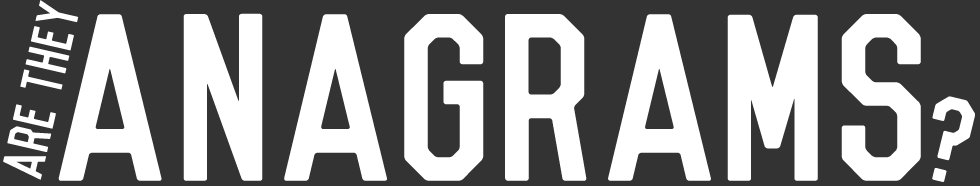
<style>
.page{position:relative;width:980px;height:186px;background:#333333}
.page>*{position:absolute;margin:0}
.t1{font:53.6px "Vincent-Regular";color:#ffffff;scale:0.96 1}
.t2{font:218.7px "Vincent-Regular";color:#ffffff}
.t3{font:111.2px "Vincent-Regular";color:#ffffff}
</style>
<div class="page">
<p class="t1" style="left:3px;top:0px;width:76px;height:180px;rotate:-77deg">Are They</p>
<p class="t2" style="left:58px;top:13px;width:863px;height:168px">aNAGRAMs</p>
<p class="t3" style="left:932px;top:96px;width:43px;height:86px;rotate:14deg">?</p>
</div>
